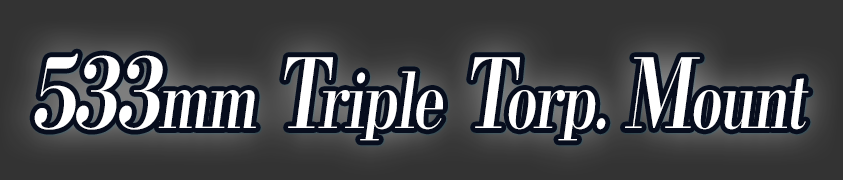
<style>
.page{position:relative;width:843px;height:180px;background:#333333}
.page>*{position:absolute;margin:0}
.t1{font:76.8px "KochoStd-Heavy";letter-spacing:-0.03em;color:#ffffff;font-style:italic;scale:0.75 1}
.t2{font:96px "KochoStd-Heavy";letter-spacing:-0.03em;color:#ffffff;font-style:italic;scale:0.75 1}
</style>
<div class="page">
<p class="t1" style="left:34px;top:53px;width:775px;height:88px"><span class="t2">533</span>mm<span class="t2"> T</span>riple<span class="t2"> T</span>orp. <span class="t2">M</span>ount</p>
</div>
